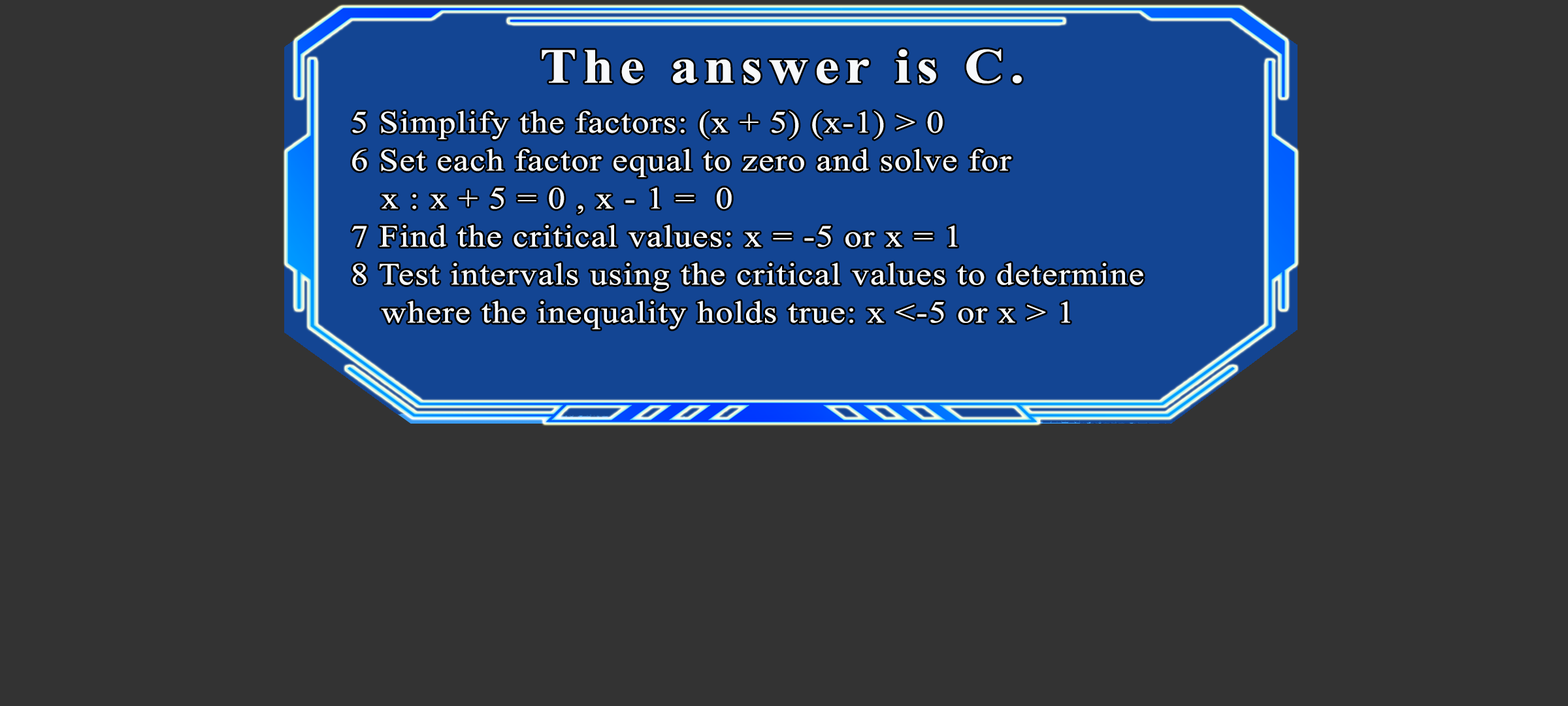
<style>
.page{position:relative;width:1568px;height:706px;background:#333333}
.page>*{position:absolute;margin:0}
.t1{font:49px "TimesNewRomanPS-BoldMT";letter-spacing:0.115em;color:#f7f9fb;scale:1.12 1}
.t2{font:30.9px/38px "TimesNewRomanPSMT";letter-spacing:0.035em;color:#f7f9fb;scale:1.12 1}
</style>
<div class="page">
<p class="t1" style="left:542px;top:49px;width:480px;height:35px">The answer is C.</p>
<p class="t2" style="left:351px;top:110px;width:792px;height:219px">5 Simplify the factors: (x + 5) (x-1) &gt; 0<br>6 Set each factor equal to zero and solve for<br>  x : x + 5 = 0 , x - 1 =  0<br>7 Find the critical values: x = -5 or x = 1<br>8 Test intervals using the critical values to determine<br>  where the inequality holds true: x &lt;-5 or x &gt; 1</p>
</div>
